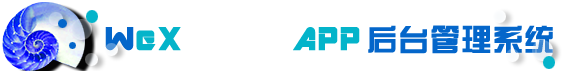
<style>
.page{position:relative;width:574px;height:71px;background:#ffffff}
.page>*{position:absolute;margin:0}
.t1{font:36px "ARDESTINE";letter-spacing:0.02em;color:#04b4ca;font-weight:bold}
.t2{font:36px "ARDESTINE";letter-spacing:0.02em;color:#0466ca;font-weight:bold}
.t3{font:30px "FZZYJW--GB1-0";letter-spacing:0.02em;color:#0466ca;font-weight:bold}
</style>
<div class="page">
<p class="t1" style="left:105px;top:27px;width:255px;height:24px"><span class="t2">W</span>eX     APP</p>
<p class="t3" style="left:368px;top:25px;width:185px;height:29px">后台管理系统</p>
</div>
